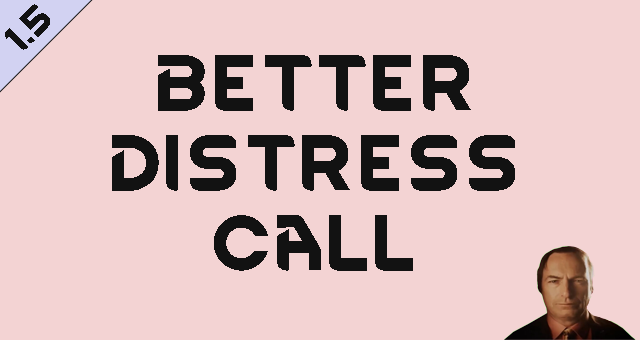
<style>
.page{position:relative;width:640px;height:340px;background:#f3d3d3}
.page>*{position:absolute;margin:0}
.t1{font:66.7px "RimWordFont";color:#121212}
</style>
<div class="page">
<p class="t1" style="left:112px;top:55px;width:403px;height:216px;text-align:center">better distress call</p>
</div>
